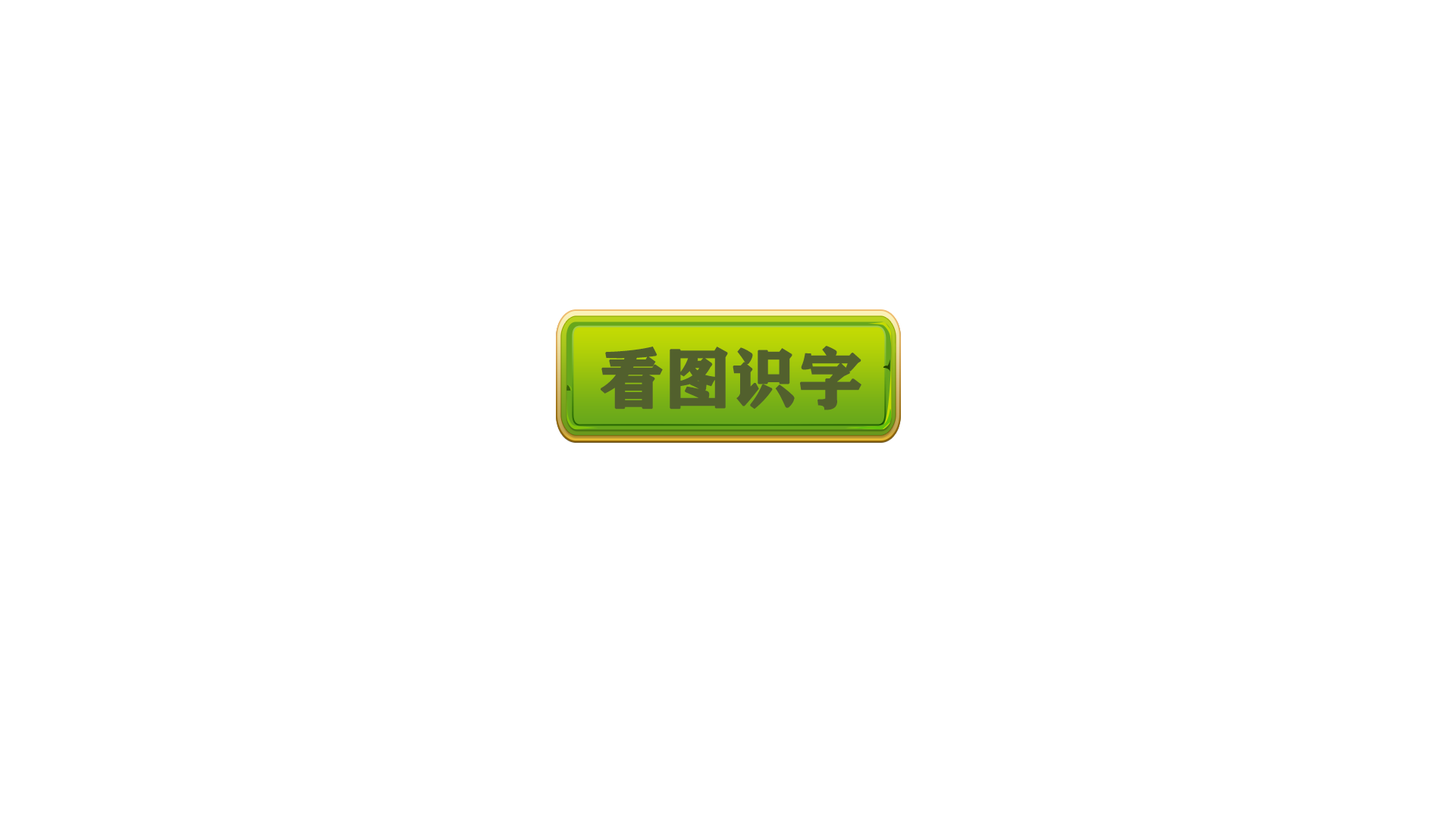
<style>
.page{position:relative;width:1456px;height:819px;background:#ffffff}
.page>*{position:absolute;margin:0}
.t1{font:64.3px "FZCHSJW--GB1-0";color:#52602d;font-weight:bold}
</style>
<div class="page">
<p class="t1" style="left:601px;top:346px;width:260px;height:64px">看图识字</p>
</div>
